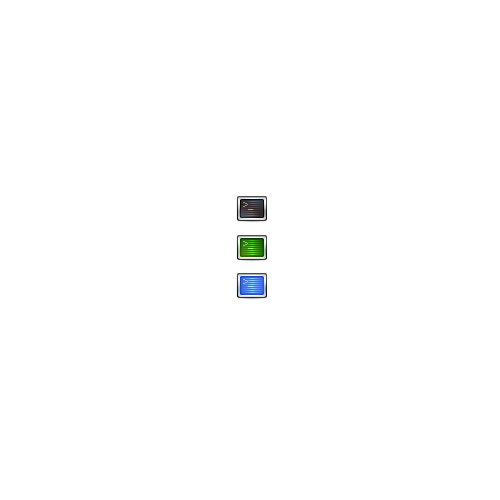
<style>
.page{position:relative;width:500px;height:500px;background:#ffffff}
.page>*{position:absolute;margin:0}
.t1{font:9px "Gotham-Thin";color:#9e9999}
.t2{font:9px "Gotham-Thin";color:#9cc68c}
.t3{font:9px "Gotham-Thin"}
</style>
<div class="page">
<p class="t1" style="left:243px;top:202px;width:10px;height:8px">&gt;_</p>
<p class="t2" style="left:243px;top:241px;width:10px;height:8px">&gt;_</p>
<p class="t3" style="left:243px;top:279px;width:10px;height:8px">&gt;_</p>
</div>
